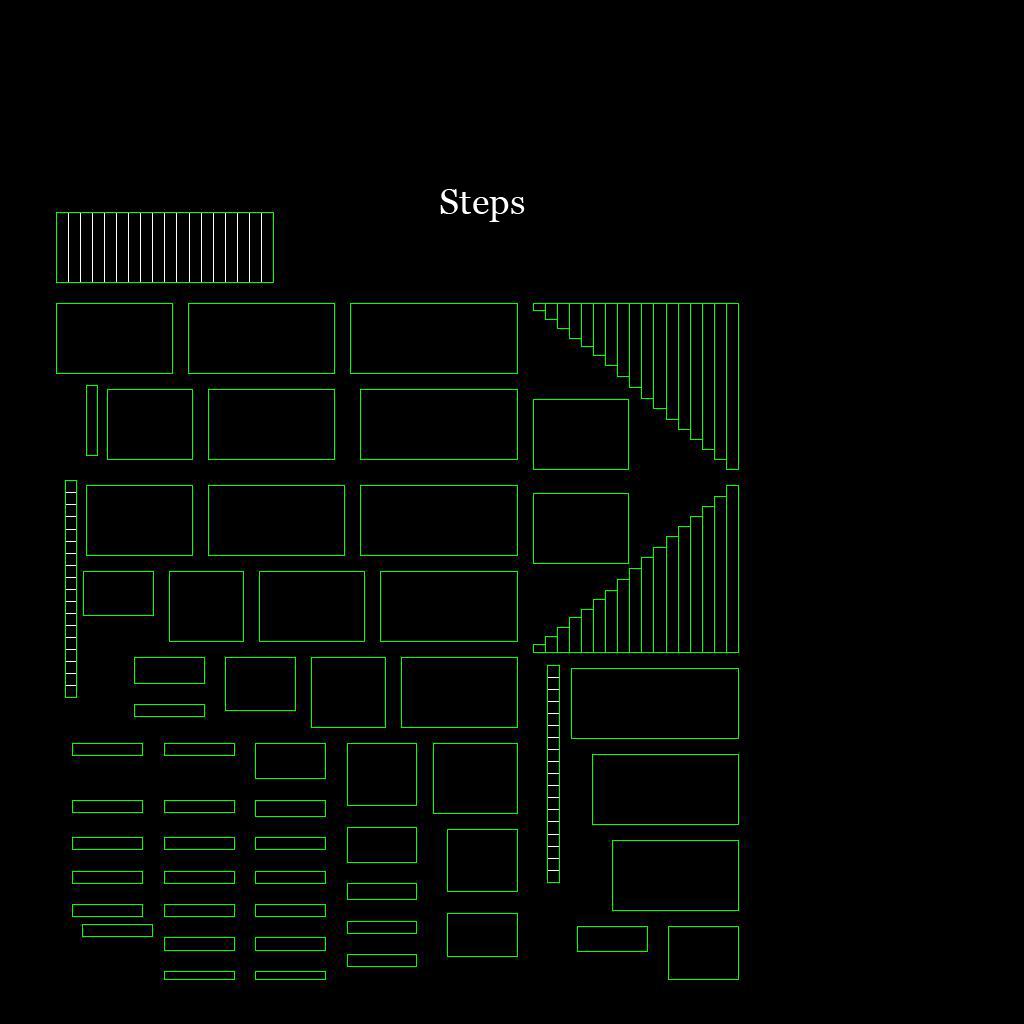
<style>
.page{position:relative;width:1024px;height:1024px;background:#000000}
.page>*{position:absolute;margin:0}
.t1{font:36px "Georgia";color:#ffffff}
</style>
<div class="page">
<p class="t1" style="left:440px;top:189px;width:85px;height:33px">Steps</p>
</div>
